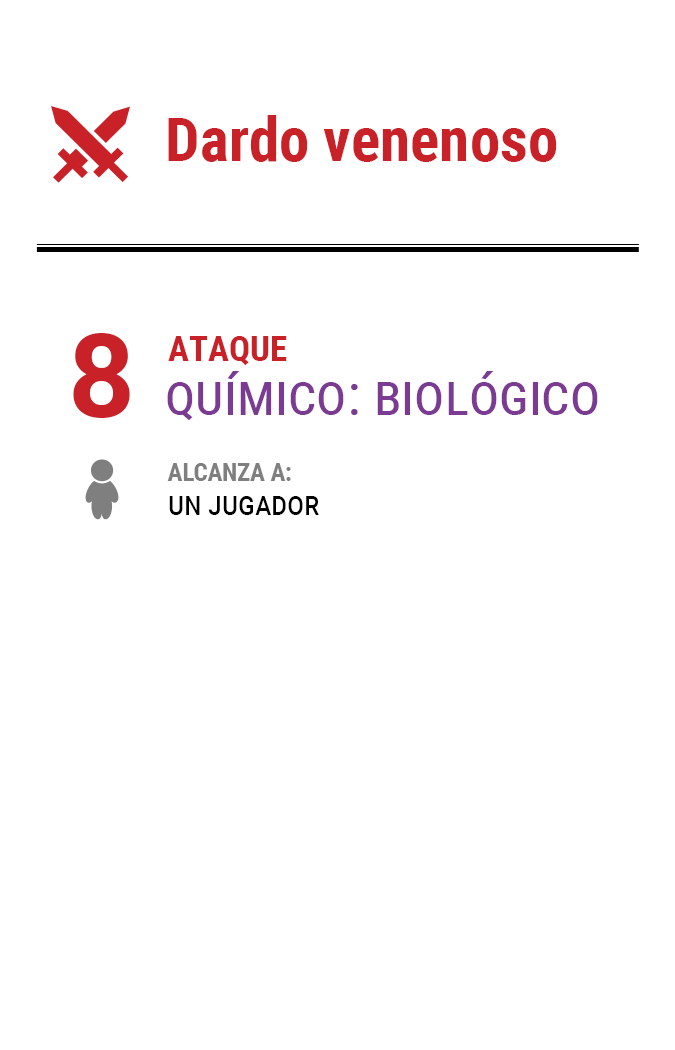
<style>
.page{position:relative;width:675px;height:1050px;background:#ffffff}
.page>*{position:absolute;margin:0}
.t1{font:61.2px "RobotoCondensed-Bold";color:#c82127}
.t2{font:116.7px "Roboto-Bold";letter-spacing:-0.16em;color:#c82127}
.t3{font:35px "RobotoCondensed-Bold";color:#c82127}
.t4{font:58.3px "RobotoCondensed-Regular";color:#7c3b92;font-variant:small-caps}
.t5{font:25px/33.3px "RobotoCondensed-Bold";letter-spacing:-0.01em;color:#7f7f7f}
.t6{font:33.3px/33.3px "RobotoCondensed-Regular";letter-spacing:-0.01em;color:#000000;font-variant:small-caps}
</style>
<div class="page">
<p class="t1" style="left:168px;top:115px;width:389px;height:47px">Dardo venenoso</p>
<p class="t2" style="left:73px;top:333px;width:57px;height:85px">8</p>
<p class="t3" style="left:168px;top:336px;width:119px;height:29px">ATAQUE</p>
<p class="t4" style="left:167px;top:371px;width:431px;height:50px">químico: biológico</p>
<p class="t5" style="left:167px;top:463px;width:152px;height:52px">ALCANZA A:<br><span class="t6">un jugador</span></p>
</div>
